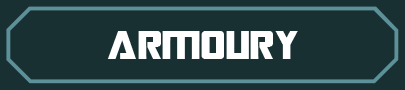
<style>
.page{position:relative;width:405px;height:90px;background:#193033}
.page>*{position:absolute;margin:0}
.t1{font:45px "TransformersMovie";letter-spacing:0.02em;color:#ffffff}
</style>
<div class="page">
<p class="t1" style="left:107px;top:31px;width:191px;height:28px">Armoury</p>
</div>
